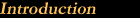
<style>
.page{position:relative;width:140px;height:18px;background:#000000}
.page>*{position:absolute;margin:0}
.t1{font:18px "Garamond-Bold";color:#fec45f;font-style:italic}
</style>
<div class="page">
<p class="t1" style="left:0px;top:2px;width:96px;height:13px">Introduction</p>
</div>
